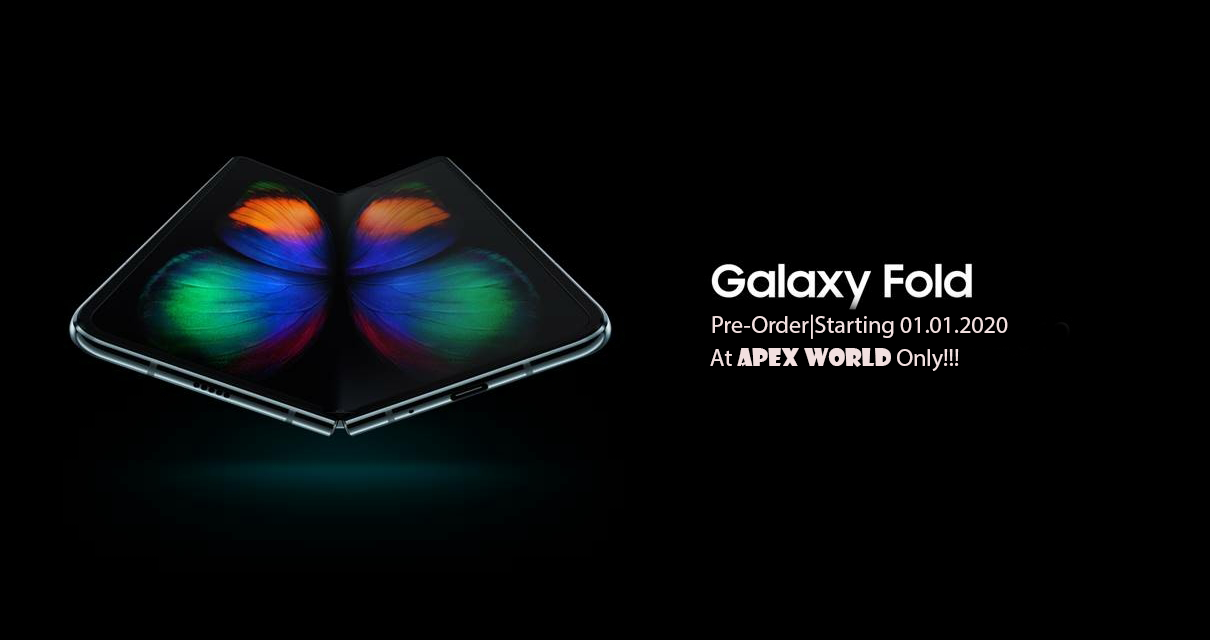
<style>
.page{position:relative;width:1210px;height:640px;background:#000000}
.page>*{position:absolute;margin:0}
.t1{font:24px "MyriadPro-Regular";color:#f2e0e0}
.t2{font:24px "ShowcardGothic-Reg";color:#f2e0e0}
</style>
<div class="page">
<p class="t1" style="left:712px;top:314px;width:296px;height:25px">Pre-Order|Starting 01.01.2020</p>
<p class="t2" style="left:710px;top:348px;width:249px;height:23px"><span class="t1"><br>                                                        At </span>Apex WOrld<span class="t1"> Only!!!</span></p>
</div>
